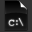
<style>
.page{position:relative;width:32px;height:32px;background:#333333}
.page>*{position:absolute;margin:0}
.t1{font:11px "CourierNewPS-BoldMT";letter-spacing:-0.125em;color:#bdbdbd}
.t2{font:11px "CourierNewPS-BoldMT";letter-spacing:-0.2em;color:#bdbdbd}
.t3{font:10px "CourierNewPS-BoldMT";letter-spacing:-0.1em;color:#bdbdbd}
</style>
<div class="page">
<p class="t1" style="left:8px;top:18px;width:16px;height:8px">C<span class="t2">:</span><span class="t3">\</span></p>
</div>
